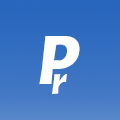
<style>
.page{position:relative;width:120px;height:120px}
.page>*{position:absolute;margin:0}
.t1{font:75px "AlegreyaSans-ExtraBoldItalic";color:#ffffff}
.t2{font:41.7px "AlegreyaSans-ExtraBoldItalic";color:#ffffff}
</style>
<div class="page">
<p class="t1" style="left:39px;top:36px;width:41px;height:48px">P</p>
<p class="t2" style="left:52px;top:74px;width:15px;height:20px">r</p>
</div>
